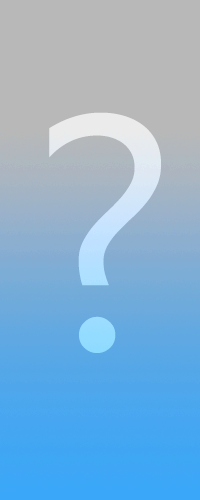
<style>
.page{position:relative;width:200px;height:500px;background:#b8b8b8}
.page>*{position:absolute;margin:0}
.t1{font:333.4px "SegoeUI"}
</style>
<div class="page">
<p class="t1" style="left:49px;top:112px;width:112px;height:241px">?</p>
</div>
